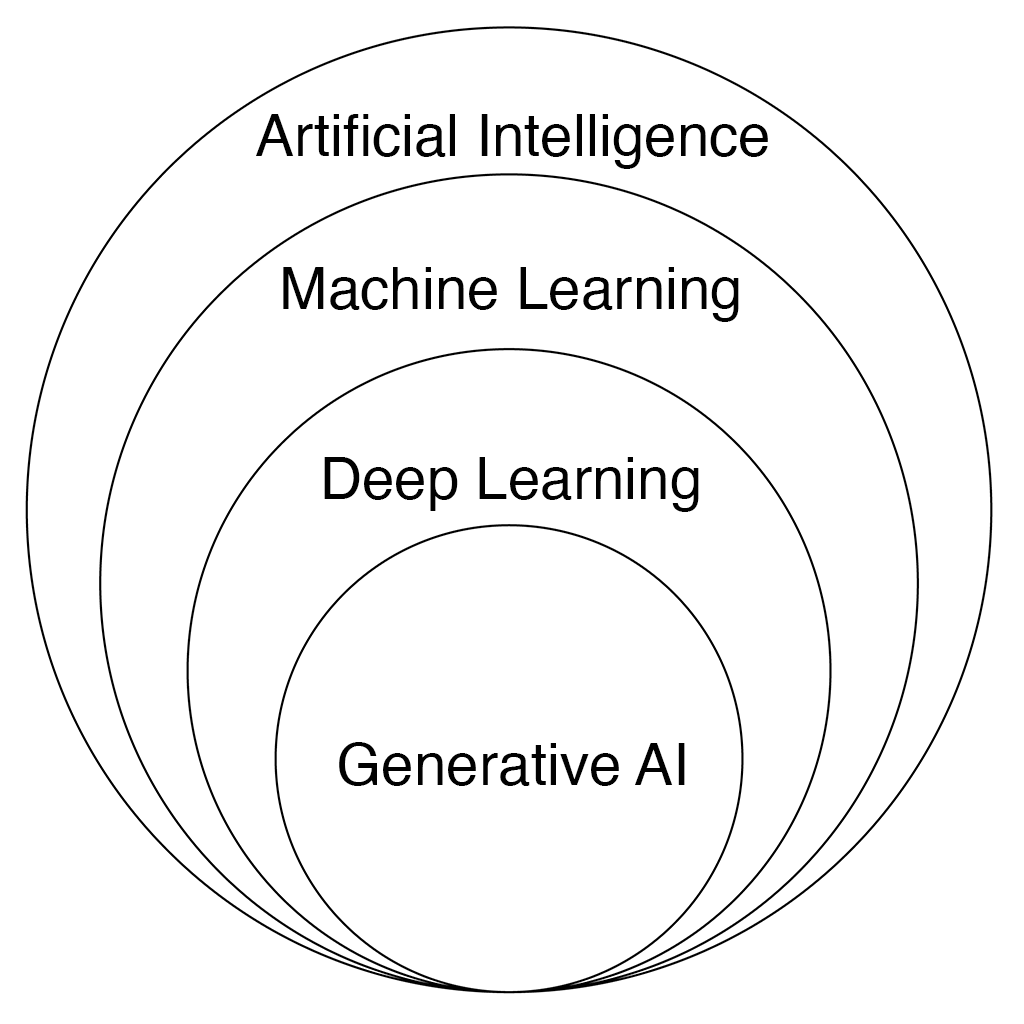
<style>
.page{position:relative;width:1024px;height:1024px;background:#ffffff}
.page>*{position:absolute;margin:0}
.t1{font:58.3px "Helvetica";color:#010101}
</style>
<div class="page">
<p class="t1" style="left:256px;top:114px;width:512px;height:55px">Artificial Intelligence</p>
<p class="t1" style="left:283px;top:267px;width:456px;height:55px">Machine Learning</p>
<p class="t1" style="left:324px;top:457px;width:375px;height:55px">Deep Learning</p>
<p class="t1" style="left:339px;top:742px;width:346px;height:44px">Generative AI</p>
</div>
